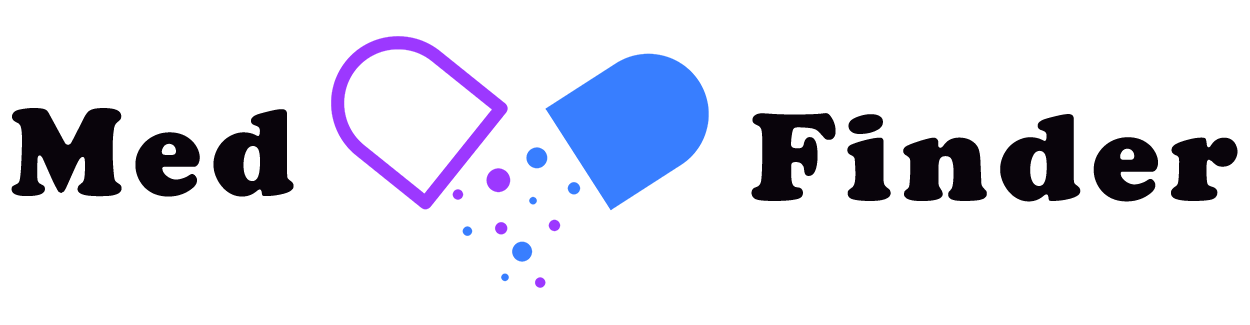
<style>
.page{position:relative;width:1250px;height:325px;background:#ffffff}
.page>*{position:absolute;margin:0}
.t1{font:128px "CooperBlack";letter-spacing:0.08em;color:#09040b}
</style>
<div class="page">
<p class="t1" style="left:11px;top:108px;width:283px;height:89px">Med</p>
<p class="t1" style="left:751px;top:113px;width:487px;height:89px">Finder</p>
</div>
